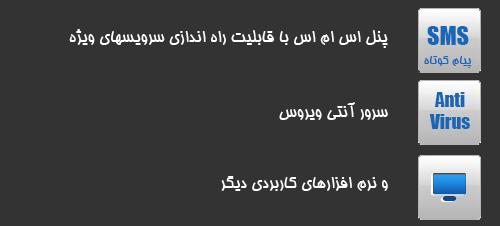
<style>
.page{position:relative;width:500px;height:226px;background:#333333}
.page>*{position:absolute;margin:0}
.t1{font:18px "BHoma";color:#fefefe}
.t2{font:18px "BHoma";color:#ffffff}
</style>
<div class="page">
<p class="t1" style="left:69px;top:29px;width:319px;height:19px">پنل اس ام اس با قابلیت راه اندازی سرویسهای ویژه</p>
<p class="t2" style="left:279px;top:102px;width:109px;height:18px">سرور آنتی ویروس</p>
<p class="t2" style="left:221px;top:176px;width:167px;height:15px">و نرم افزارهای کاربردی دیگر</p>
</div>
